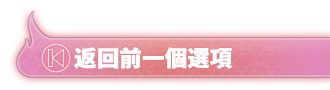
<style>
.page{position:relative;width:330px;height:90px;background:#ffffff}
.page>*{position:absolute;margin:0}
.t1{font:22px "SourceHanSansCN-Heavy";color:#ffffff;font-weight:bold}
</style>
<div class="page">
<p class="t1" style="left:74px;top:47px;width:159px;height:22px">返回前一個選項</p>
</div>
